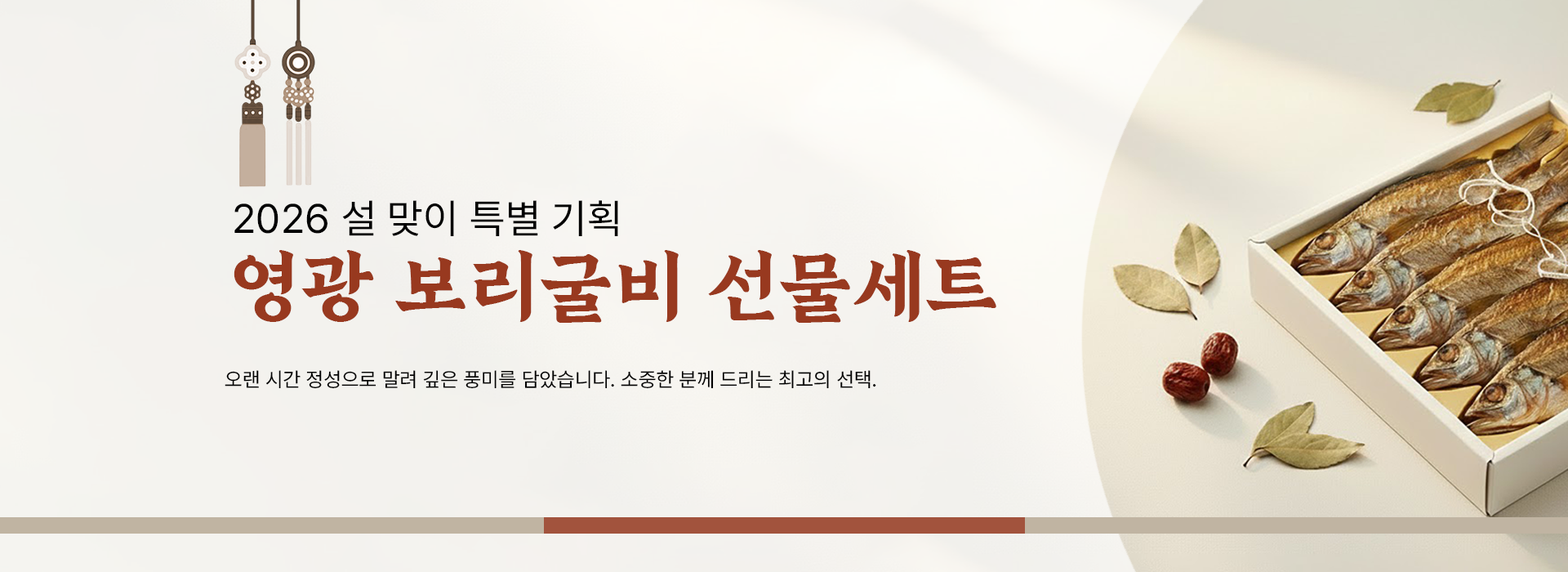
<style>
.page{position:relative;width:1568px;height:572px}
.page>*{position:absolute;margin:0}
.t1{font:40.8px "Pretendard-Regular";letter-spacing:0.01em;color:#000000}
.t2{font:75.2px "GapyeongHanseokbong-Bold";letter-spacing:0.01em;color:#98391f}
.t3{font:20.2px "Pretendard-Regular";letter-spacing:0.01em;color:#000000}
</style>
<div class="page">
<p class="t1" style="left:234px;top:200px;width:384px;height:36px">2026 설 맞이 특별 기획</p>
<p class="t2" style="left:234px;top:250px;width:762px;height:73px">영광 보리굴비 선물세트</p>
<p class="t3" style="left:225px;top:370px;width:651px;height:19px">오랜 시간 정성으로 말려 깊은 풍미를 담았습니다. 소중한 분께 드리는 최고의 선택.</p>
</div>
